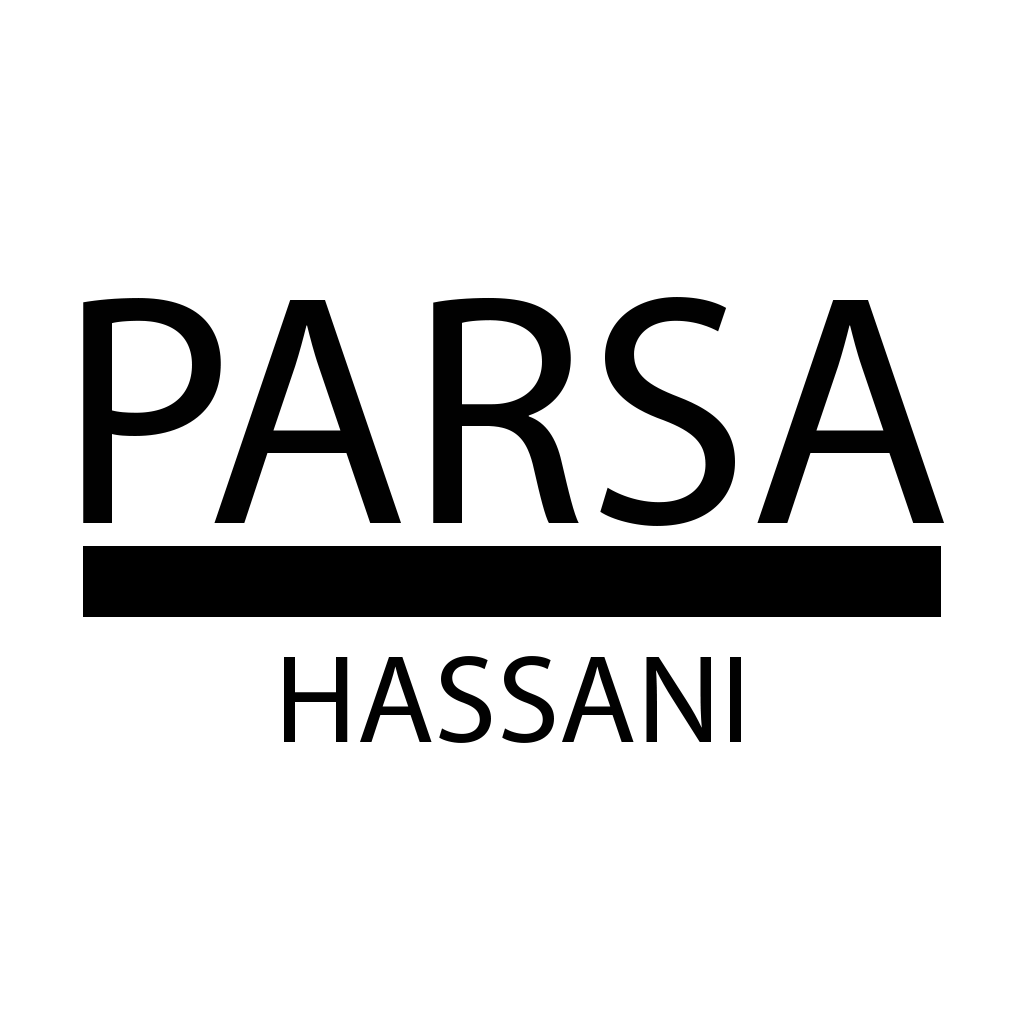
<style>
.page{position:relative;width:1024px;height:1024px;background:#ffffff}
.page>*{position:absolute;margin:0}
.t1{font:330.8px "MyriadPro-Regular";color:#010101}
.t2{font:126.7px "MyriadPro-Regular";color:#010101}
</style>
<div class="page">
<p class="t1" style="left:83px;top:297px;width:861px;height:229px">PARSA</p>
<p class="t2" style="left:284px;top:656px;width:457px;height:87px">HASSANI</p>
</div>
